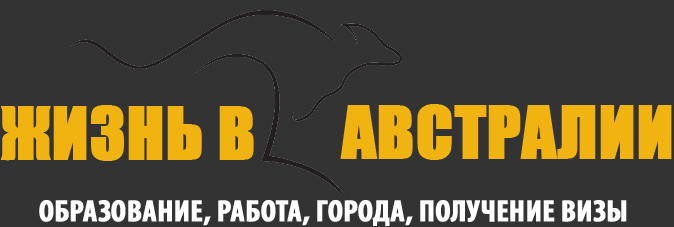
<style>
.page{position:relative;width:674px;height:227px;background:#333333}
.page>*{position:absolute;margin:0}
.t1{font:66.7px "Impact";color:#f0b310;text-transform:uppercase;font-weight:bold}
.t2{font:30.7px "MyriadPro-BoldCond";color:#ffffff;text-transform:uppercase;font-weight:bold}
.t3{font:22.7px "MyriadPro-BoldCond";color:#ffffff;text-transform:uppercase;font-weight:bold}
</style>
<div class="page">
<p class="t1" style="left:1px;top:105px;width:253px;height:56px">Жизнь в</p>
<p class="t1" style="left:340px;top:104px;width:332px;height:56px">Австралии</p>
<p class="t2" style="left:39px;top:200px;width:588px;height:26px"><span class="t3">  </span>ОБРАЗОВАНИЕ, РАБОТА, ГОРОДА, ПОЛУЧЕНИЕ ВИЗЫ</p>
</div>
